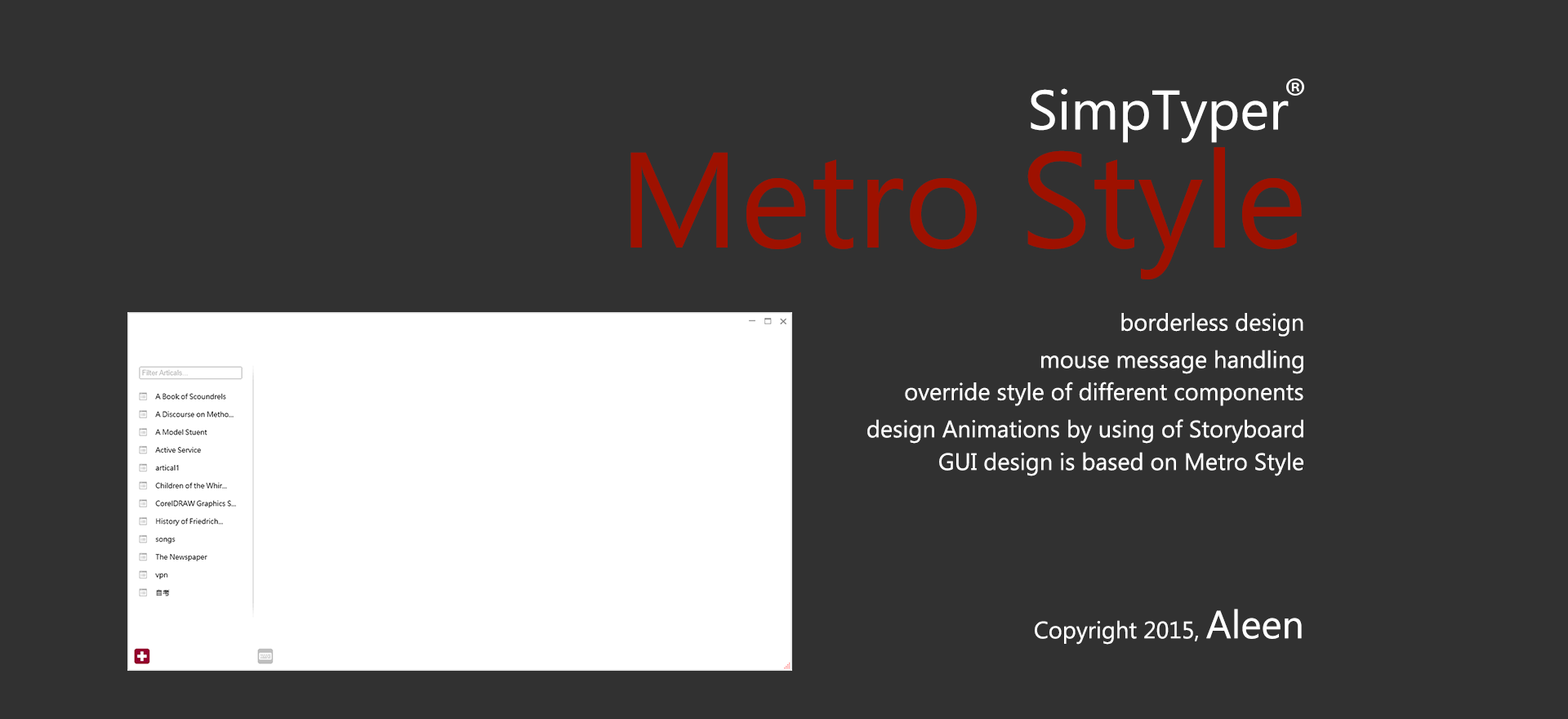
<style>
.page{position:relative;width:1568px;height:719px;background:#313131}
.page>*{position:absolute;margin:0}
.t1{font:55.5px "MicrosoftNewTaiLue";color:#ffffff}
.t2{font:135.3px "MicrosoftNewTaiLue";color:#9e1100}
.t3{font:23.6px "MicrosoftNewTaiLue";color:#ffffff}
.t4{font:39.2px "MicrosoftNewTaiLue";color:#ffffff}
</style>
<div class="page">
<p class="t1" style="left:1031px;top:88px;width:258px;height:55px">SimpTyper</p>
<p class="t2" style="left:630px;top:147px;width:672px;height:132px">Metro Style</p>
<p class="t3" style="left:1121px;top:313px;width:182px;height:23px">borderless design</p>
<p class="t3" style="left:1041px;top:350px;width:262px;height:24px">mouse message handling</p>
<p class="t3" style="left:905px;top:381px;width:398px;height:25px">override style of different components</p>
<p class="t3" style="left:867px;top:419px;width:436px;height:24px">design Animations by using of Storyboard</p>
<p class="t3" style="left:939px;top:452px;width:364px;height:24px">GUI design is based on Metro Style</p>
<p class="t3" style="left:1035px;top:608px;width:267px;height:36px">Copyright 2015, <span class="t4">Aleen</span></p>
</div>
